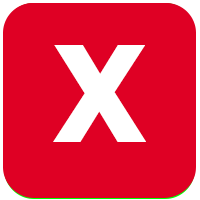
<style>
.page{position:relative;width:200px;height:200px;background:#df0024}
.page>*{position:absolute;margin:0}
.t1{font:133.3px "Tahoma-Bold";letter-spacing:0.2em;color:#ffffff;text-transform:uppercase}
</style>
<div class="page">
<p class="t1" style="left:53px;top:45px;width:93px;height:97px">X</p>
</div>
